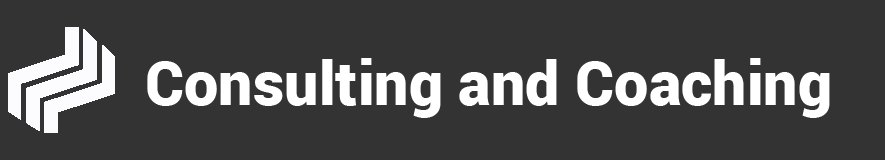
<style>
.page{position:relative;width:885px;height:160px;background:#333333}
.page>*{position:absolute;margin:0}
.t1{font:61.2px "Roboto-Black";color:#ffffff}
</style>
<div class="page">
<p class="t1" style="left:147px;top:58px;width:683px;height:60px">Consulting and Coaching</p>
</div>
